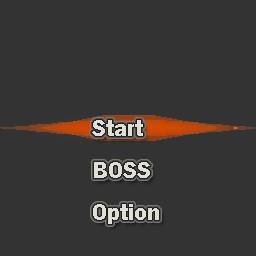
<style>
.page{position:relative;width:256px;height:256px;background:#333333}
.page>*{position:absolute;margin:0}
.t1{font:24px "FranklinGothic-Demi";color:#e1dfd3}
</style>
<div class="page">
<p class="t1" style="left:92px;top:120px;width:67px;height:104px">Start<br>BOSS<br>Option</p>
</div>
